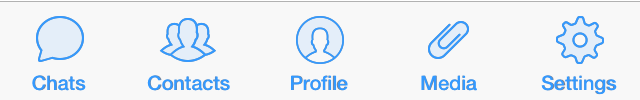
<style>
.page{position:relative;width:640px;height:100px;background:#f8f8f8}
.page>*{position:absolute;margin:0}
.t1{font:20px "HelveticaNeue-Medium";color:#3399ff}
.t2{font:20px "HelveticaNeue";color:#3399ff}
.t3{font:20px "HelveticaNeue"}
</style>
<div class="page">
<p class="t1" style="left:32px;top:75px;width:54px;height:16px">Chats</p>
<p class="t2" style="left:33px;top:75px;width:52px;height:16px">Chats</p>
<p class="t1" style="left:147px;top:75px;width:83px;height:16px">Contacts</p>
<p class="t3" style="left:148px;top:75px;width:81px;height:16px">Contacts</p>
<p class="t1" style="left:291px;top:75px;width:57px;height:16px">Profile</p>
<p class="t2" style="left:292px;top:75px;width:55px;height:16px">Profile</p>
<p class="t1" style="left:421px;top:75px;width:56px;height:16px">Media</p>
<p class="t2" style="left:422px;top:75px;width:54px;height:16px">Media</p>
<p class="t1" style="left:541px;top:75px;width:76px;height:20px">Settings</p>
<p class="t2" style="left:542px;top:75px;width:73px;height:20px">Settings</p>
</div>
